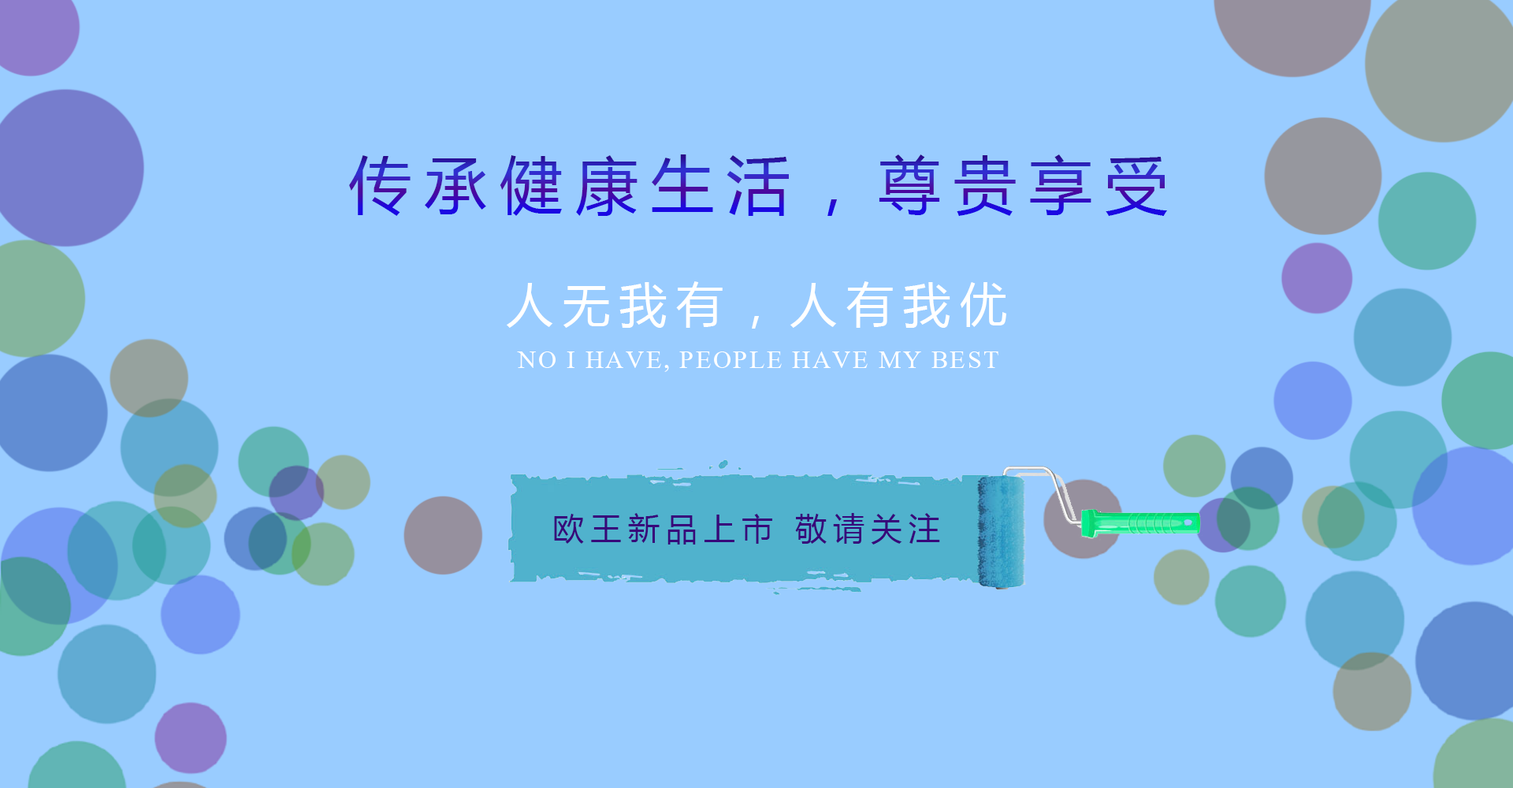
<style>
.page{position:relative;width:1513px;height:788px;background:#99ccff}
.page>*{position:absolute;margin:0}
.t1{font:63px "MicrosoftYaHei";letter-spacing:0.2em}
.t2{font:47.3px "MicrosoftYaHei";letter-spacing:0.2em;color:#ffffff}
.t3{font:37.8px "MicrosoftHimalaya";letter-spacing:0.05em;color:#ffffff;text-transform:uppercase}
.t4{font:31.5px "MicrosoftYaHei";letter-spacing:0.2em;color:#37077a}
</style>
<div class="page">
<p class="t1" style="left:349px;top:154px;width:818px;height:62px">传承健康生活，尊贵享受</p>
<p class="t2" style="left:506px;top:281px;width:500px;height:48px">人无我有，人有我优</p>
<p class="t3" style="left:517px;top:351px;width:481px;height:21px">No I have, people have my best</p>
<p class="t4" style="left:554px;top:513px;width:386px;height:32px">欧王新品上市 敬请关注</p>
</div>
